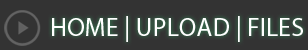
<style>
.page{position:relative;width:308px;height:50px;background:#333333}
.page>*{position:absolute;margin:0}
.t1{font:26px "MyriadPro-Regular";color:#ffffff;text-transform:uppercase}
</style>
<div class="page">
<p class="t1" style="left:52px;top:16px;width:251px;height:26px">HOME | UPLOAD | FILES</p>
</div>
